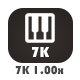
<style>
.page{position:relative;width:80px;height:80px;background:#ffffff}
.page>*{position:absolute;margin:0}
.t1{font:15px "Bauhaus93";color:#ffffff}
.t2{font:12px "Bauhaus93";color:#464646}
</style>
<div class="page">
<p class="t1" style="left:32px;top:47px;width:17px;height:10px">7K</p>
<p class="t2" style="left:15px;top:65px;width:49px;height:10px">7K 1.00x</p>
</div>
